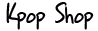
<style>
.page{position:relative;width:98px;height:31px;background:#ffffff}
.page>*{position:absolute;margin:0}
.t1{font:32.2px "MTOGrungeSans";color:#000000}
</style>
<div class="page">
<p class="t1" style="left:6px;top:2px;width:88px;height:28px">Kpop Shop</p>
</div>
